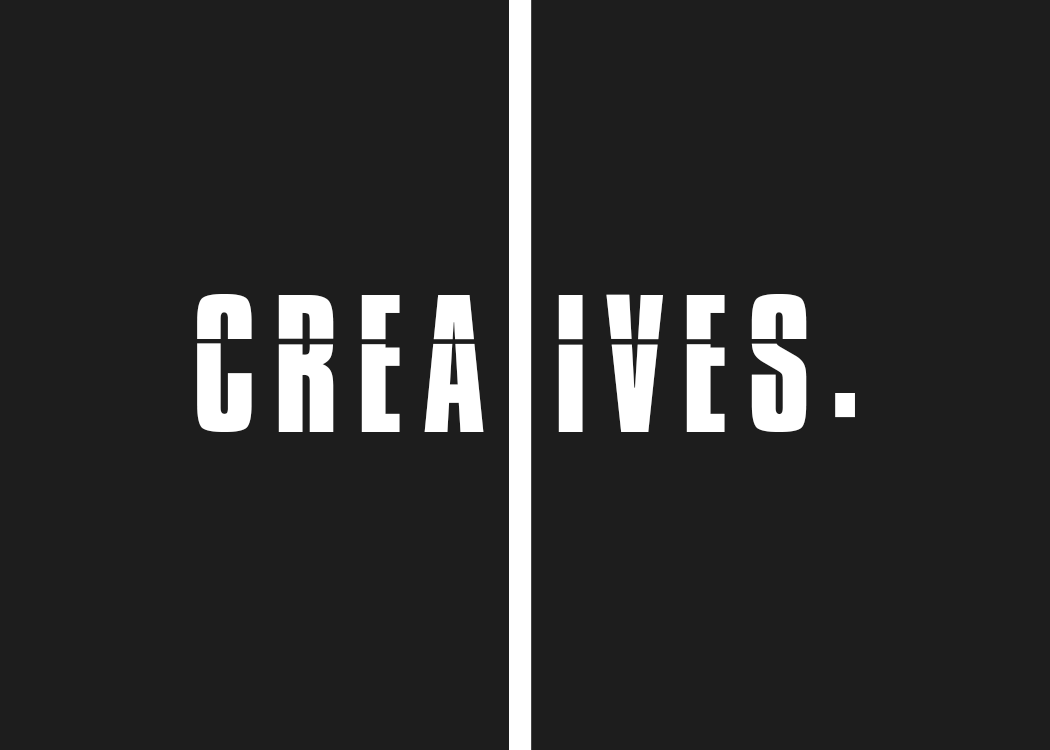
<style>
.page{position:relative;width:1050px;height:750px;background:#1d1d1d}
.page>*{position:absolute;margin:0}
.t1{font:169.2px "Impossible-0";letter-spacing:0.1em;color:#ffffff}
</style>
<div class="page">
<p class="t1" style="left:197px;top:294px;width:658px;height:138px">CREA IVES.</p>
</div>
